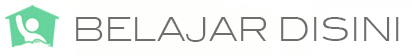
<style>
.page{position:relative;width:412px;height:56px;background:#fefffd}
.page>*{position:absolute;margin:0}
.t1{font:32.6px "BlairITCTTLight";letter-spacing:-0.01em;color:#6e6e6e}
</style>
<div class="page">
<p class="t1" style="left:76px;top:17px;width:323px;height:25px">BELAJAR DISINI</p>
</div>
